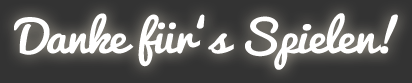
<style>
.page{position:relative;width:412px;height:83px;background:#333333}
.page>*{position:absolute;margin:0}
.t1{font:43.1px "Pacifico-Regular";letter-spacing:-0.025em;color:#ffffff;scale:1.11 1}
</style>
<div class="page">
<p class="t1" style="left:14px;top:13px;width:384px;height:57px">Danke für‘s Spielen!</p>
</div>
